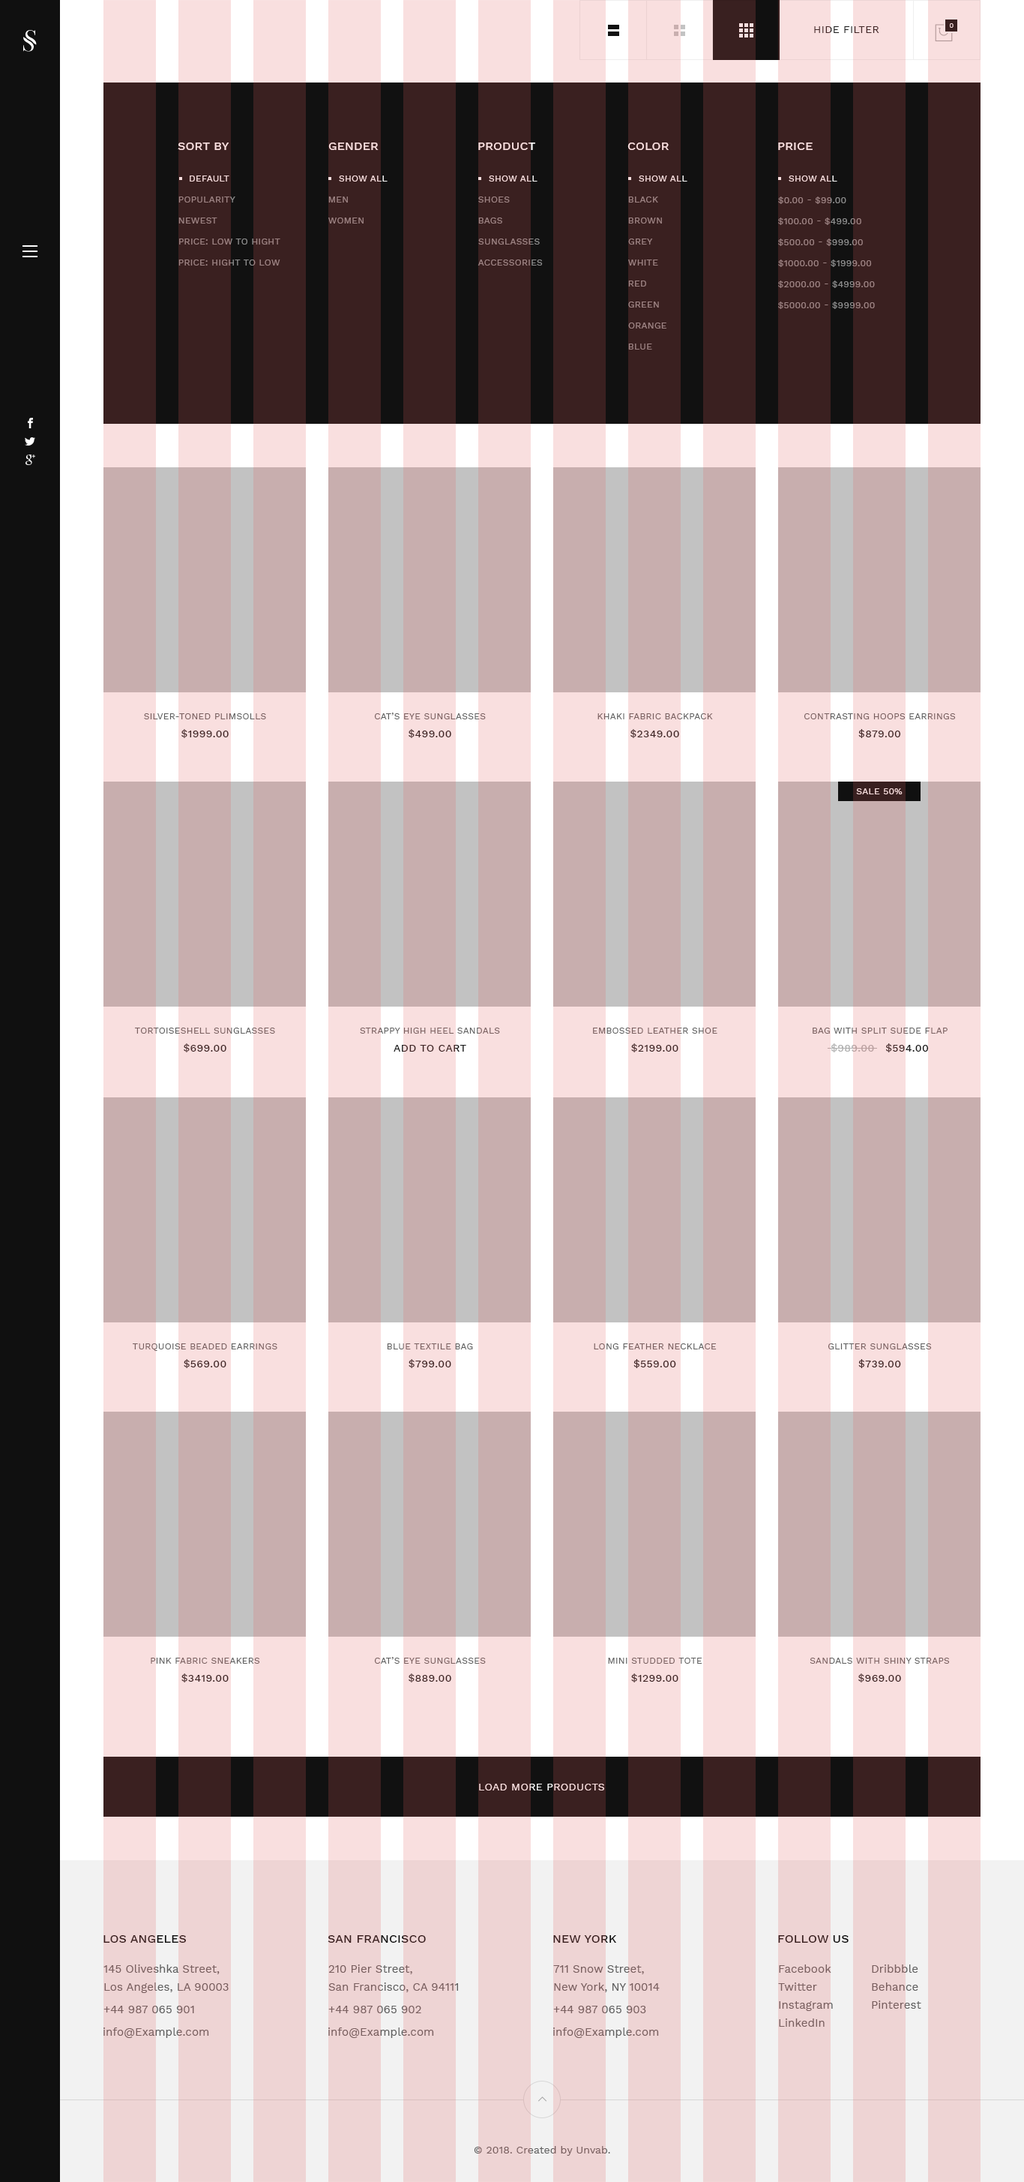
<style>
.page{position:relative;width:1024px;height:2182px;background:#c8aeae}
.page>*{position:absolute;margin:0}
.t1{font:10.5px "WorkSans-Regular";letter-spacing:0.025em;color:#412727;text-transform:uppercase}
.t2{font:6.8px "WorkSans-Regular";letter-spacing:0.025em;color:#f9dfdf;text-transform:uppercase}
.t3{font:12px "WorkSans-Medium";letter-spacing:0.01em;color:#f9dfdf;text-transform:uppercase}
.t4{font:9px "WorkSans-Regular";letter-spacing:0.025em;color:#f9dfdf;text-transform:uppercase}
.t5{font:9px "WorkSans-Regular";letter-spacing:0.025em;color:#8e8e8e;text-transform:uppercase}
.t6{font:9px/22.5px "WorkSans-Regular";letter-spacing:0.025em}
.t7{font:10.5px/18px "WorkSans-Medium";letter-spacing:0.025em}
.t8{font:10.5px/18px "WorkSans-Medium";letter-spacing:0.025em;text-transform:uppercase}
.t9{font:10.5px "WorkSans-Regular";letter-spacing:0.025em;color:#f9dfdf;text-transform:uppercase}
.t10{font:12px "WorkSans-Medium";letter-spacing:0.01em;text-transform:uppercase}
.t11{font:12px "WorkSans-Medium";letter-spacing:0.01em;color:#381e1e;text-transform:uppercase}
.t12{font:11.2px/18px "WorkSans-Regular";letter-spacing:0.005em;color:#795f5f}
.t13{font:11.2px "WorkSans-Regular";letter-spacing:0.005em;color:#795f5f}
.t14{font:10.5px "WorkSans-Regular";letter-spacing:0.005em;color:#795f5f}
</style>
<div class="page">
<p class="t1" style="left:814px;top:26px;width:66px;height:7px">hide filter</p>
<p class="t2" style="left:950px;top:23px;width:4px;height:5px">0</p>
<p class="t3" style="left:178px;top:142px;width:52px;height:8px">sort by</p>
<p class="t3" style="left:328px;top:142px;width:51px;height:8px">gender</p>
<p class="t3" style="left:478px;top:142px;width:58px;height:8px">product</p>
<p class="t3" style="left:628px;top:142px;width:41px;height:8px">color</p>
<p class="t3" style="left:778px;top:142px;width:35px;height:8px">price</p>
<p class="t4" style="left:190px;top:176px;width:40px;height:6px">default</p>
<p class="t4" style="left:339px;top:176px;width:49px;height:6px">show all</p>
<p class="t4" style="left:489px;top:176px;width:49px;height:6px">show all</p>
<p class="t4" style="left:639px;top:176px;width:49px;height:6px">show all</p>
<p class="t4" style="left:789px;top:176px;width:49px;height:6px">show all</p>
<p class="t5" style="left:178px;top:196px;width:58px;height:6px">popularity</p>
<p class="t5" style="left:328px;top:196px;width:20px;height:6px">men</p>
<p class="t5" style="left:478px;top:196px;width:32px;height:6px">shoes</p>
<p class="t5" style="left:628px;top:196px;width:30px;height:6px">black</p>
<p class="t5" style="left:778px;top:196px;width:69px;height:8px">$0.00 - $99.00</p>
<p class="t5" style="left:178px;top:218px;width:40px;height:6px">newest</p>
<p class="t5" style="left:328px;top:218px;width:36px;height:6px">women</p>
<p class="t5" style="left:478px;top:218px;width:24px;height:6px">bags</p>
<p class="t5" style="left:628px;top:218px;width:34px;height:6px">brown</p>
<p class="t5" style="left:778px;top:218px;width:84px;height:7px">$100.00 - $499.00</p>
<p class="t5" style="left:179px;top:238px;width:101px;height:6px">price: low to hight</p>
<p class="t5" style="left:478px;top:238px;width:62px;height:6px">Sunglasses</p>
<p class="t5" style="left:628px;top:238px;width:25px;height:6px">grey</p>
<p class="t5" style="left:778px;top:238px;width:85px;height:8px">$500.00 - $999.00</p>
<p class="t5" style="left:178px;top:260px;width:102px;height:6px">price: hight to low</p>
<p class="t5" style="left:478px;top:260px;width:65px;height:6px">ACCESSORIES</p>
<p class="t5" style="left:628px;top:260px;width:30px;height:6px">white</p>
<p class="t5" style="left:778px;top:260px;width:94px;height:7px">$1000.00 - $1999.00</p>
<p class="t5" style="left:628px;top:280px;width:18px;height:6px">red</p>
<p class="t5" style="left:778px;top:280px;width:97px;height:8px">$2000.00 - $4999.00</p>
<p class="t5" style="left:628px;top:302px;width:31px;height:6px">green</p>
<p class="t5" style="left:778px;top:302px;width:97px;height:7px">$5000.00 - $9999.00</p>
<p class="t5" style="left:628px;top:322px;width:39px;height:6px">orange</p>
<p class="t5" style="left:628px;top:344px;width:24px;height:6px">blue</p>
<p class="t6" style="left:144px;top:713px;width:122px;height:25px;text-align:center">SILVER-TONED PLIMSOLLS<br><span class="t7">$1999.00</span></p>
<p class="t6" style="left:374px;top:712px;width:112px;height:26px;text-align:center">CAT’S EYE SUNGLASSES<br><span class="t7">$499.00</span></p>
<p class="t6" style="left:598px;top:713px;width:115px;height:25px;text-align:center">KHAKI FABRIC BACKPACK<br><span class="t7">$2349.00</span></p>
<p class="t6" style="left:804px;top:713px;width:152px;height:25px;text-align:center">CONTRASTING HOOPS EARRINGS<br><span class="t7">$879.00</span></p>
<p class="t4" style="left:856px;top:788px;width:47px;height:6px">sale 50%</p>
<p class="t6" style="left:135px;top:1028px;width:140px;height:24px;text-align:center">TORTOISESHELL SUNGLASSES<br><span class="t7">$699.00</span></p>
<p class="t6" style="left:360px;top:1028px;width:140px;height:24px;text-align:center">STRAPPY HIGH HEEL SANDALS<br><span class="t8">add to cart</span></p>
<p class="t6" style="left:593px;top:1028px;width:125px;height:24px;text-align:center">EMBOSSED LEATHER SHOE<br><span class="t7">$2199.00</span></p>
<p class="t6" style="left:813px;top:1028px;width:135px;height:24px;text-align:center">BAG WITH SPLIT SUEDE FLAP<br><span class="t7">$989.00</span><span class="t7">   $594.00</span></p>
<p class="t6" style="left:133px;top:1343px;width:145px;height:25px;text-align:center">TURQUOISE BEADED EARRINGS<br><span class="t7">$569.00</span></p>
<p class="t6" style="left:387px;top:1343px;width:86px;height:25px;text-align:center">BLUE TEXTILE BAG<br><span class="t7">$799.00</span></p>
<p class="t6" style="left:594px;top:1343px;width:123px;height:25px;text-align:center">LONG FEATHER NECKLACE<br><span class="t7">$559.00</span></p>
<p class="t6" style="left:828px;top:1343px;width:104px;height:25px;text-align:center">GLITTER SUNGLASSES<br><span class="t7">$739.00</span></p>
<p class="t6" style="left:151px;top:1658px;width:109px;height:24px;text-align:center">PINK FABRIC SNEAKERS<br><span class="t7">$3419.00</span></p>
<p class="t6" style="left:374px;top:1657px;width:112px;height:25px;text-align:center">CAT’S EYE SUNGLASSES<br><span class="t7">$889.00</span></p>
<p class="t6" style="left:608px;top:1658px;width:95px;height:24px;text-align:center">MINI STUDDED TOTE<br><span class="t7">$1299.00</span></p>
<p class="t6" style="left:810px;top:1658px;width:140px;height:24px;text-align:center">SANDALS WITH SHINY STRAPS<br><span class="t7">$969.00</span></p>
<p class="t9" style="left:479px;top:1784px;width:125px;height:6px">load more products</p>
<p class="t10" style="left:104px;top:1935px;width:82px;height:7px">los angeles</p>
<p class="t11" style="left:328px;top:1935px;width:98px;height:7px">San Francisco</p>
<p class="t11" style="left:554px;top:1935px;width:63px;height:7px">New York</p>
<p class="t11" style="left:778px;top:1935px;width:71px;height:7px">follow us</p>
<p class="t12" style="left:104px;top:1964px;width:125px;height:29px">145 Oliveshka Street, <br>Los Angeles, LA 90003</p>
<p class="t12" style="left:328px;top:1964px;width:130px;height:28px">210 Pier Street,<br>San Francisco, CA 94111</p>
<p class="t12" style="left:554px;top:1965px;width:106px;height:27px">711 Snow Street, <br>New York, NY 10014</p>
<p class="t12" style="left:778px;top:1964px;width:55px;height:62px">Facebook<br>Twitter<br>Instagram<br>LinkedIn</p>
<p class="t12" style="left:872px;top:1964px;width:50px;height:44px">Dribbble<br>Behance<br>Pinterest</p>
<p class="t13" style="left:104px;top:2006px;width:90px;height:7px">+44 987 065 901</p>
<p class="t13" style="left:328px;top:2006px;width:94px;height:7px">+44 987 065 902</p>
<p class="t13" style="left:554px;top:2006px;width:92px;height:7px">+44 987 065 903</p>
<p class="t13" style="left:104px;top:2027px;width:105px;height:11px">info@Example.com</p>
<p class="t13" style="left:328px;top:2027px;width:106px;height:11px">info@Example.com</p>
<p class="t13" style="left:554px;top:2027px;width:105px;height:11px">info@Example.com</p>
<p class="t14" style="left:474px;top:2146px;width:136px;height:10px">© 2018. Created by Unvab.</p>
</div>
